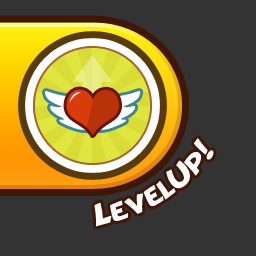
<style>
.page{position:relative;width:256px;height:256px;background:#333333}
.page>*{position:absolute;margin:0}
.t1{font:20px "BDCartoonShout";color:#ffffff}
.t2{font:24px "BDCartoonShout";color:#ffffff}
</style>
<div class="page">
<p class="t1" style="left:94px;top:138px;width:120px;height:89px;rotate:-32deg"><span class="t2">L</span>evel<span class="t2">U</span>p<span class="t2">!</span></p>
</div>
